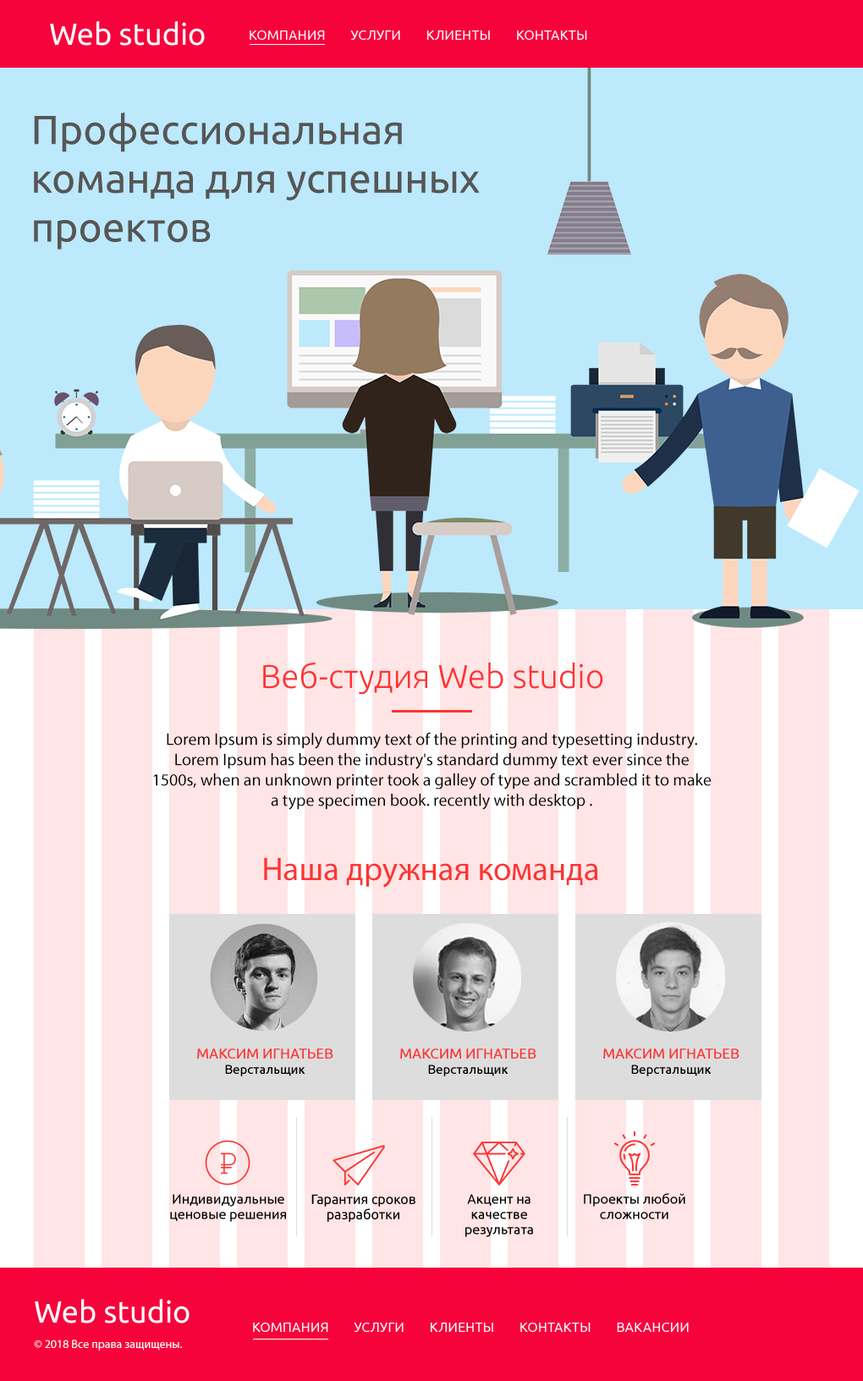
<style>
.page{position:relative;width:863px;height:1381px;background:#bde9fc}
.page>*{position:absolute;margin:0}
.t1{font:30.5px "Ubuntu-Regular";color:#ffffff}
.t2{font:13.5px "Ubuntu-Regular";color:#ffffff}
.t3{font:40.6px "Ubuntu-Regular";color:#565656}
.t4{font:33px "Ubuntu-Light";color:#ff3333}
.t5{font:16.9px "MyriadPro-Regular";color:#000000}
.t6{font:33px "MyriadPro-Regular";color:#ff3333}
.t7{font:14.4px "Ubuntu-Regular";color:#ff3333}
.t8{font:12.7px "Ubuntu-Regular";color:#000000}
.t9{font:13.5px/15.2px "Ubuntu-Regular";color:#000000}
.t10{font:11.8px "MyriadPro-Regular";color:#ffffff}
</style>
<div class="page">
<p class="t1" style="left:50px;top:21px;width:155px;height:25px">Web studio</p>
<p class="t2" style="left:250px;top:30px;width:337px;height:10px">КОМПАНИЯ        УСЛУГИ        КЛИЕНТЫ        КОНТАКТЫ</p>
<p class="t3" style="left:34px;top:113px;width:446px;height:137px">Профессиональная команда для успешных проектов</p>
<p class="t4" style="left:263px;top:662px;width:340px;height:33px">Веб-студия Web studio</p>
<p class="t5" style="left:153px;top:732px;width:559px;height:78px;text-align:center">Lorem Ipsum is simply dummy text of the printing and typesetting industry. Lorem Ipsum has been the industry's standard dummy text ever since the 1500s, when an unknown printer took a galley of type and scrambled it to make a type specimen book. recently with desktop .</p>
<p class="t6" style="left:264px;top:857px;width:334px;height:31px">Наша дружная команда</p>
<p class="t7" style="left:197px;top:1049px;width:136px;height:28px;text-align:center">МАКСИМ ИГНАТЬЕВ<br><span class="t8">Верстальщик</span></p>
<p class="t7" style="left:400px;top:1049px;width:137px;height:28px;text-align:center">МАКСИМ ИГНАТЬЕВ<br><span class="t8">Верстальщик</span></p>
<p class="t7" style="left:603px;top:1049px;width:137px;height:28px;text-align:center">МАКСИМ ИГНАТЬЕВ<br><span class="t8">Верстальщик</span></p>
<p class="t9" style="left:584px;top:1193px;width:102px;height:27px;text-align:center">Проекты любой сложности</p>
<p class="t9" style="left:170px;top:1194px;width:116px;height:28px;text-align:center">Индивидуальные ценовые решения</p>
<p class="t9" style="left:311px;top:1194px;width:105px;height:28px;text-align:center">Гарантия сроков разработки</p>
<p class="t9" style="left:465px;top:1194px;width:68px;height:43px;text-align:center">Акцент на качестве результата</p>
<p class="t1" style="left:35px;top:1299px;width:155px;height:25px">Web studio</p>
<p class="t2" style="left:253px;top:1323px;width:436px;height:9px">КОМПАНИЯ        УСЛУГИ        КЛИЕНТЫ        КОНТАКТЫ        ВАКАНСИИ</p>
<p class="t10" style="left:34px;top:1340px;width:148px;height:11px">© 2018 Все права защищены.</p>
</div>
